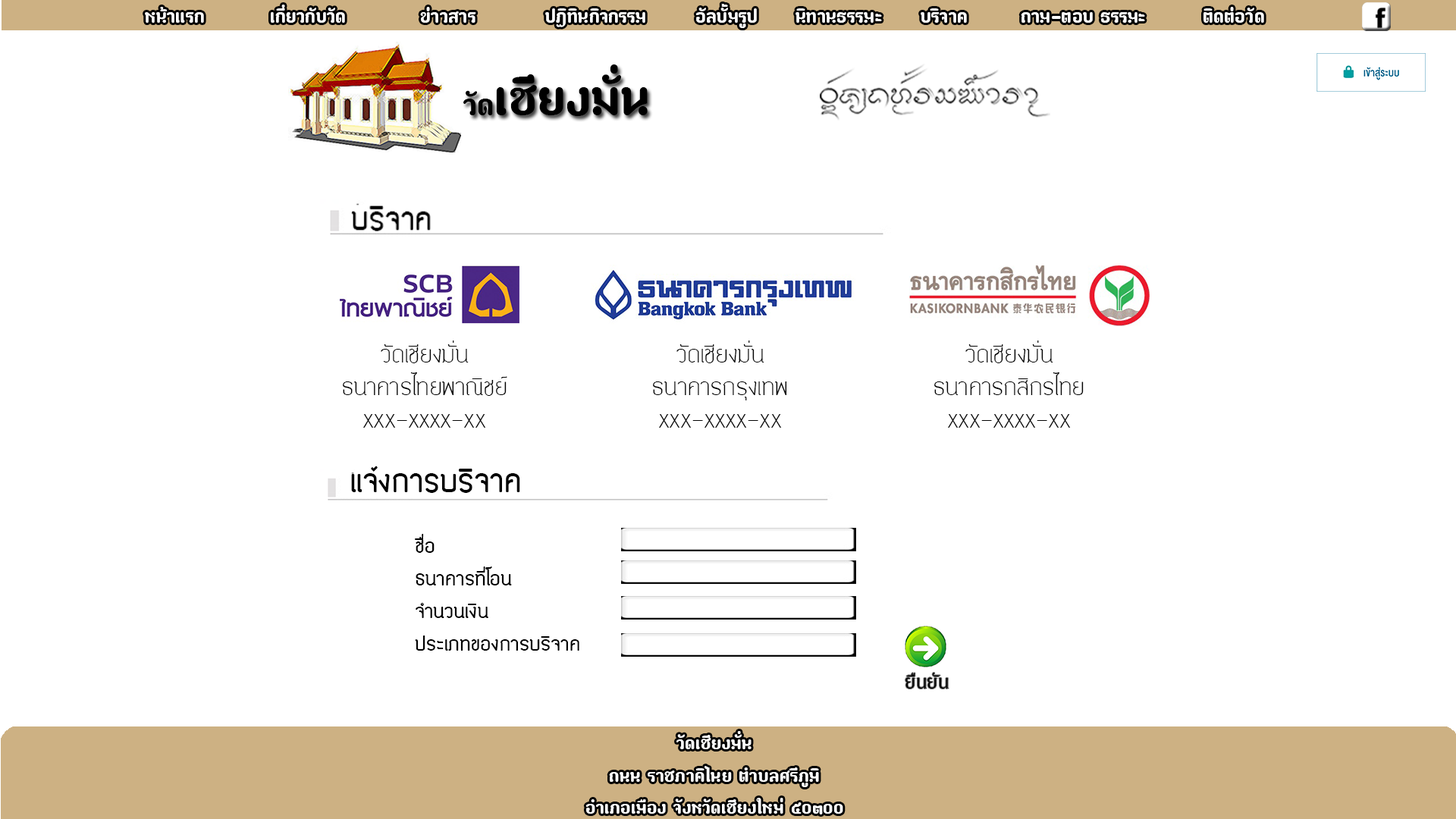
<style>
.page{position:relative;width:1456px;height:819px;background:#ffffff}
.page>*{position:absolute;margin:0}
.t1{font:27.3px "paaymaay";color:#f9f9f9}
.t2{font:73.6px "paaymaay";color:#000000}
.t3{font:44.2px "paaymaay";color:#000000}
.t4{font:27.3px "EDPenSook-normaltone";color:#020202}
.t5{font:36.4px "EDPenSook-NormalToneBold";color:#020202}
.t6{font:22.7px/32.6px "EDPenSook-NormalToneBold";color:#020202}
.t7{font:27.3px "PGVIM";color:#020202}
.t8{font:26.9px "paaymaay";color:#fdfdfc}
</style>
<div class="page">
<p class="t1" style="left:145px;top:4px;width:1119px;height:24px">หน้าแรก    เกี่ยวกับวัด    ข่าวสาร    ปฏิทินกิจกรรม   อัลบั้มรูป  นิทานธรรมะ  บริจาค   ถาม-ตอบ ธรรมะ    ติดต่อวัด</p>
<p class="t2" style="left:463px;top:64px;width:185px;height:52px"><span class="t3">วัด</span>เชียงมั่น</p>
<p class="t4" style="left:343px;top:340px;width:164px;height:88px;text-align:center">วัดเชียงมั่น<br>ธนาคารไทยพาณิชย์<br>xxx-xxxx-xx</p>
<p class="t4" style="left:653px;top:340px;width:134px;height:88px;text-align:center">วัดเชียงมั่น<br>ธนาคารกรุงเทพ<br>xxx-xxxx-xx</p>
<p class="t4" style="left:934px;top:340px;width:150px;height:88px;text-align:center">วัดเชียงมั่น<br>ธนาคารกสิกรไทย<br>xxx-xxxx-xx</p>
<p class="t5" style="left:351px;top:466px;width:169px;height:27px">แจ้งการบริจาค</p>
<p class="t6" style="left:415px;top:534px;width:164px;height:117px;text-align:right">ชื่อ<br>ธนาคารที่โอน<br>จำนวนเงิน<br>ประเภทของการบริจาค</p>
<p class="t7" style="left:905px;top:673px;width:44px;height:16px">ยืนยัน</p>
<p class="t8" style="left:585px;top:731px;width:258px;height:83px;text-align:center">วัดเชียงมั่น<br>ถนน ราชภาคิไนย ตำบลศรีภูมิ<br>อำเภอเมือง จังหวัดเชียงใหม่ ๕o๓oo</p>
</div>
